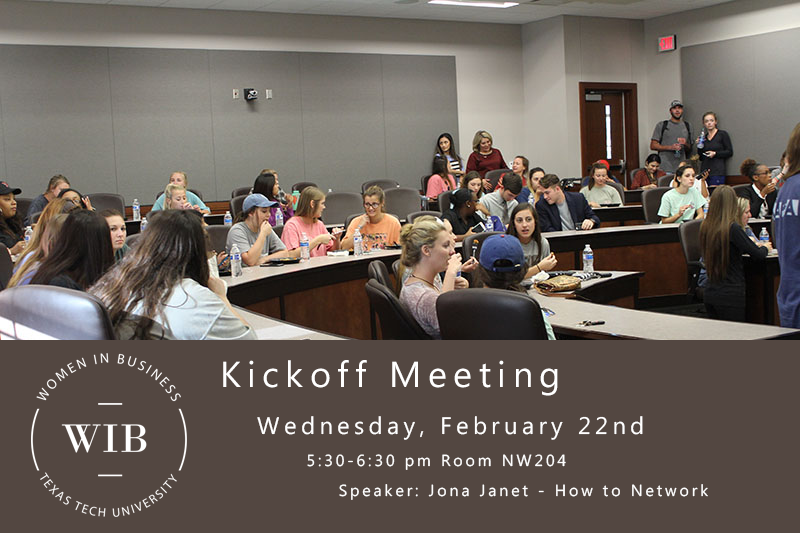
<style>
.page{position:relative;width:800px;height:533px;background:#534741}
.page>*{position:absolute;margin:0}
.t1{font:36px "MicrosoftPhagsPa";letter-spacing:0.18em;color:#ffffff}
.t2{font:16px/30px "MicrosoftPhagsPa";letter-spacing:0.18em;color:#ffffff}
.t3{font:16px "MicrosoftPhagsPa";letter-spacing:0.18em;color:#ffffff}
.t4{font:24px/9px "MicrosoftPhagsPa";letter-spacing:0.18em;color:#ffffff}
.t5{font:16px/32px "MicrosoftPhagsPa";letter-spacing:0.18em;color:#ffffff}
</style>
<div class="page">
<p class="t1" style="left:223px;top:360px;width:335px;height:36px">Kickoff Meeting</p>
<p class="t2" style="left:257px;top:416px;width:451px;height:84px;text-align:center"><span class="t3"> <br>        </span><span class="t4">Wednesday, February 22nd<br>    </span><span class="t5">    5:30-6:30 pm Room NW204<br></span>                                Speaker: Jona Janet - How to Network</p>
</div>
